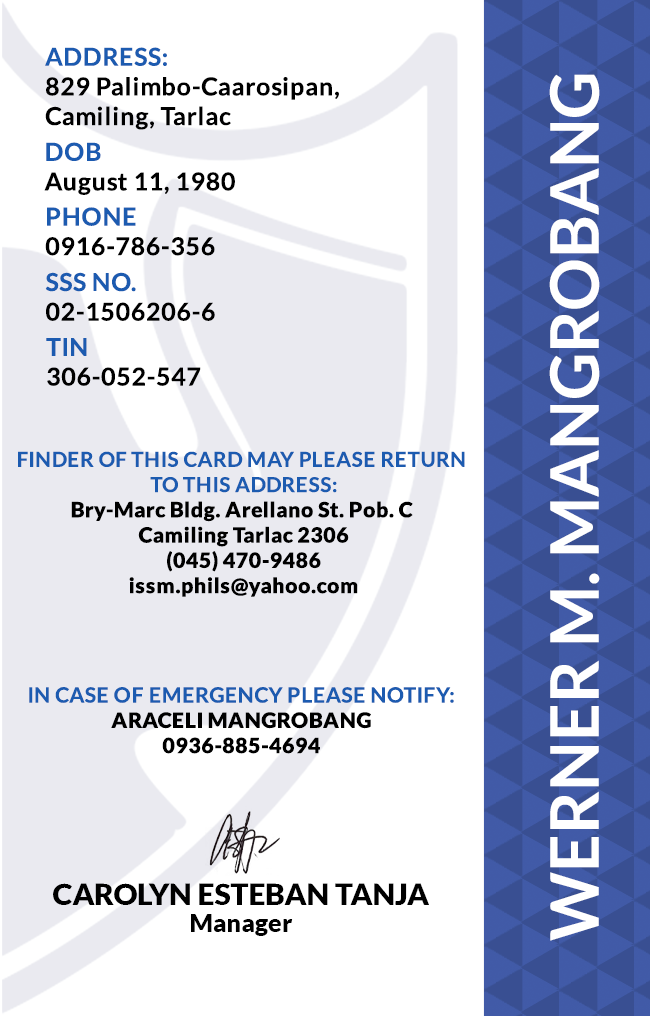
<style>
.page{position:relative;width:650px;height:1016px;background:#ffffff}
.page>*{position:absolute;margin:0}
.t1{font:24.7px/29.6px "Lato-Bold";letter-spacing:0.025em;color:#000000}
.t2{font:24.7px/29.6px "Lato-Bold";letter-spacing:0.025em;color:#1c5bb0}
.t3{font:66.7px "Lato-Bold";color:#ffffff}
.t4{font:24.7px/29.6px "Lato-Bold";letter-spacing:0.025em}
.t5{font:21.1px "Lato-Black";letter-spacing:0.025em}
.t6{font:20.5px/25.3px "Lato-Bold";letter-spacing:0.025em;text-transform:uppercase}
.t7{font:21.1px/25.3px "Lato-Bold";letter-spacing:0.025em}
.t8{font:29.5px "Lato-Black";color:#000000}
.t9{font:25px "Lato-Black";color:#000000}
</style>
<div class="page">
<p class="t1" style="left:45px;top:47px;width:294px;height:83px"><span class="t2">ADDRESS:<br></span>829 Palimbo-Caarosipan,<br>Camiling, Tarlac</p>
<p class="t3" style="left:549px;top:74px;width:51px;height:867px;rotate:-90deg">WERNER M. MANGROBANG</p>
<p class="t1" style="left:44px;top:142px;width:191px;height:53px">DOB<br>August 11, 1980</p>
<p class="t4" style="left:45px;top:207px;width:170px;height:49px">PHONE <br>0916-786-356</p>
<p class="t4" style="left:45px;top:272px;width:170px;height:49px">SSS NO.<br>02-1506206-6</p>
<p class="t1" style="left:46px;top:338px;width:155px;height:48px">TIN<br>306-052-547</p>
<p class="t5" style="left:18px;top:451px;width:447px;height:146px;text-align:center"><span class="t6">Finder of this card may please return <br>to this address:<br></span>Bry-Marc Bldg. Arellano St. Pob. C <br>Camiling Tarlac 2306<br>(045) 470-9486<br>issm.phils@yahoo.com</p>
<p class="t7" style="left:29px;top:687px;width:425px;height:67px;text-align:center">IN CASE OF EMERGENCY PLEASE NOTIFY:<br><span class="t5">ARACELI MANGROBANG<br>0936-885-4694</span></p>
<p class="t8" style="left:53px;top:883px;width:376px;height:22px">CAROLYN ESTEBAN TANJA</p>
<p class="t9" style="left:191px;top:914px;width:102px;height:22px">Manager</p>
</div>
